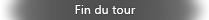
<style>
.page{position:relative;width:209px;height:20px}
.page>*{position:absolute;margin:0}
.t1{font:12.5px "LaoUI";color:#fefefe}
</style>
<div class="page">
<p class="t1" style="left:75px;top:5px;width:61px;height:9px">Fin du tour</p>
</div>
